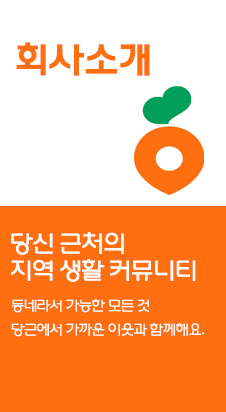
<style>
.page{position:relative;width:226px;height:412px;background:#ff6f0f}
.page>*{position:absolute;margin:0}
.t1{font:36px "Korail-Round-Gothic-Bold";letter-spacing:-0.04em;color:#ff6f0f}
.t2{font:24px/27px "Korail-Round-Gothic-Medium";letter-spacing:-0.04em;color:#ffffff}
.t3{font:14px/24px "Korail-Round-Gothic-Light";letter-spacing:-0.04em;color:#ffffff}
</style>
<div class="page">
<p class="t1" style="left:16px;top:42px;width:134px;height:34px">회사소개</p>
<p class="t2" style="left:11px;top:232px;width:185px;height:50px">당신 근처의 <br>지역 생활 커뮤니티</p>
<p class="t3" style="left:11px;top:298px;width:193px;height:39px">동네라서 가능한 모든 것<br>당근에서 가까운 이웃과 함께해요.</p>
</div>
